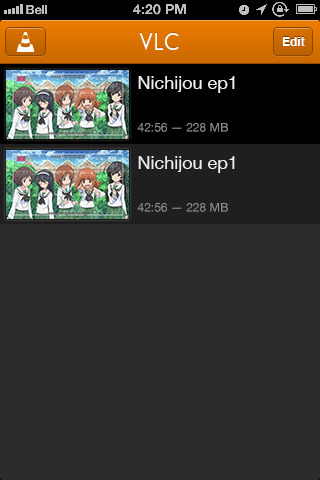
<style>
.page{position:relative;width:320px;height:480px;background:#2b2b2b}
.page>*{position:absolute;margin:0}
.t1{font:20px "Edelsans";color:#ffffff}
.t2{font:12px "Helvetica-Bold";color:#ffffff}
.t3{font:18px "HelveticaNeue";color:#efefef}
.t4{font:12px "HelveticaNeue";color:#8d8d8d}
</style>
<div class="page">
<p class="t1" style="left:139px;top:33px;width:40px;height:17px">VLC</p>
<p class="t2" style="left:282px;top:37px;width:23px;height:9px">Edit</p>
<p class="t3" style="left:138px;top:76px;width:97px;height:17px">Nichijou ep1</p>
<p class="t4" style="left:137px;top:123px;width:91px;height:9px">42:56 — 228 MB</p>
<p class="t3" style="left:138px;top:156px;width:97px;height:17px">Nichijou ep1</p>
<p class="t4" style="left:137px;top:203px;width:91px;height:9px">42:56 — 228 MB</p>
</div>
